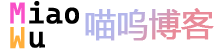
<style>
.page{position:relative;width:220px;height:50px;background:#ffffff}
.page>*{position:absolute;margin:0}
.t1{font:29.4px "CascadiasarasaMonoPL";color:#f950c7;font-weight:bold}
.t2{font:29.4px "CascadiasarasaMonoPL";color:#000000;font-weight:bold}
.t3{font:31.6px "MicrosoftYaHei";font-weight:bold}
.t4{font:29.7px "CascadiasarasaMonoPL";color:#ffae3a;font-weight:bold}
</style>
<div class="page">
<p class="t1" style="left:10px;top:2px;width:15px;height:22px">M</p>
<p class="t2" style="left:29px;top:1px;width:50px;height:23px">iao</p>
<p class="t3" style="left:85px;top:8px;width:129px;height:33px">喵呜博客</p>
<p class="t4" style="left:10px;top:27px;width:15px;height:22px">M</p>
<p class="t2" style="left:29px;top:31px;width:16px;height:17px">u</p>
</div>
